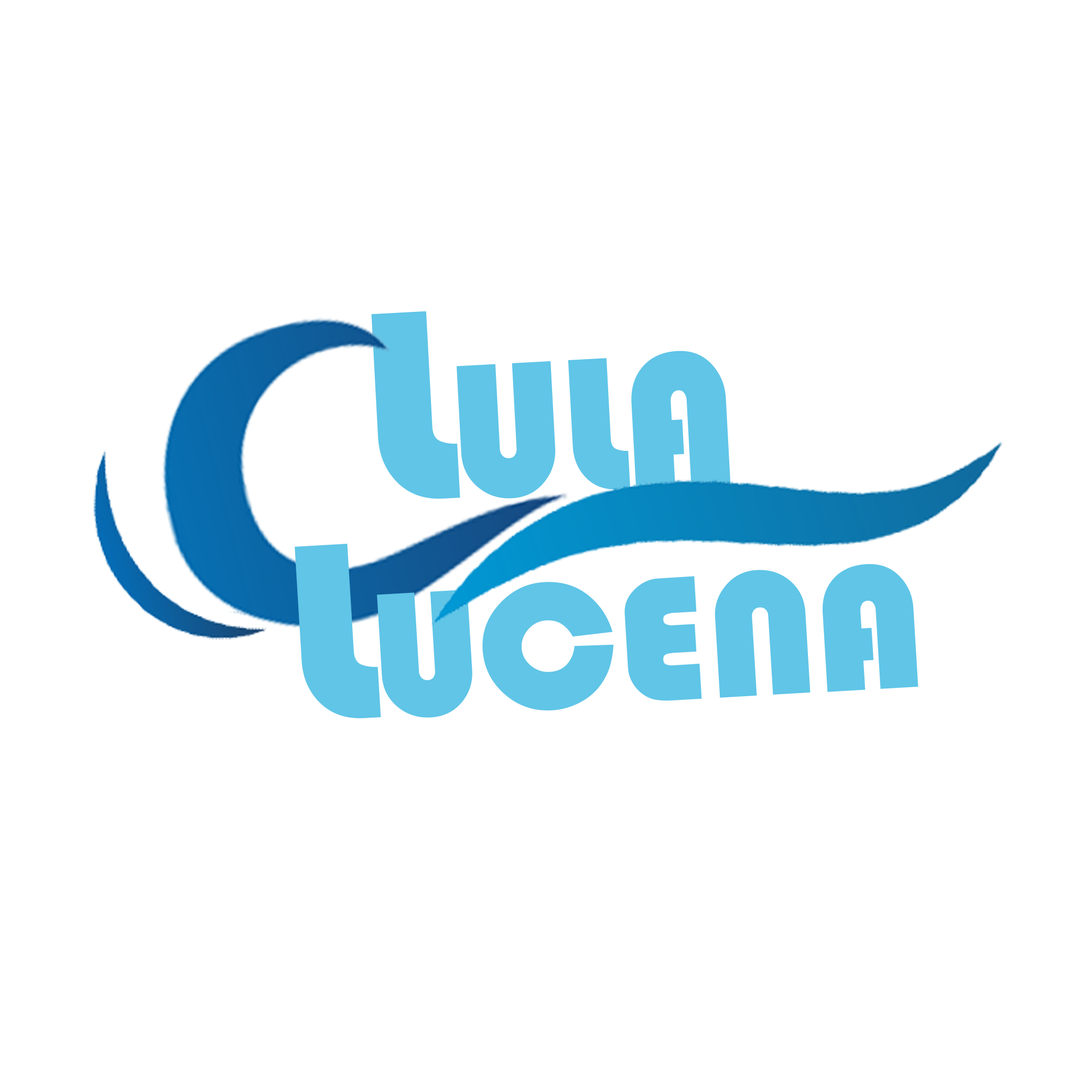
<style>
.page{position:relative;width:1092px;height:1092px;background:#ffffff}
.page>*{position:absolute;margin:0}
.t1{font:281.8px "BlippoCnd-Heavy";letter-spacing:-0.025em;color:#60c5e7;font-variant:small-caps;scale:1.16 1}
.t2{font:262.3px "BlippoCnd-Heavy";letter-spacing:-0.025em;color:#60c5e7;font-variant:small-caps;scale:1.2 1}
</style>
<div class="page">
<p class="t1" style="left:371px;top:311px;width:360px;height:188px;rotate:-3deg">Lula</p>
<p class="t2" style="left:295px;top:544px;width:623px;height:174px;rotate:-3deg">Lucena</p>
</div>
